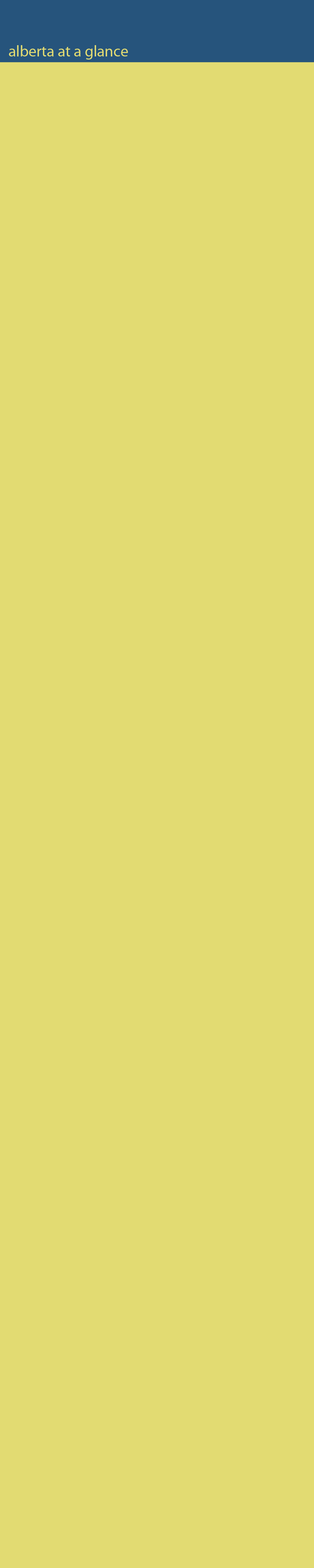
<style>
.page{position:relative;width:314px;height:1568px;background:#e2db72}
.page>*{position:absolute;margin:0}
.t1{font:15.7px "MyriadPro-Regular";color:#e2db72}
</style>
<div class="page">
<p class="t1" style="left:9px;top:45px;width:119px;height:15px">alberta at a glance</p>
</div>
